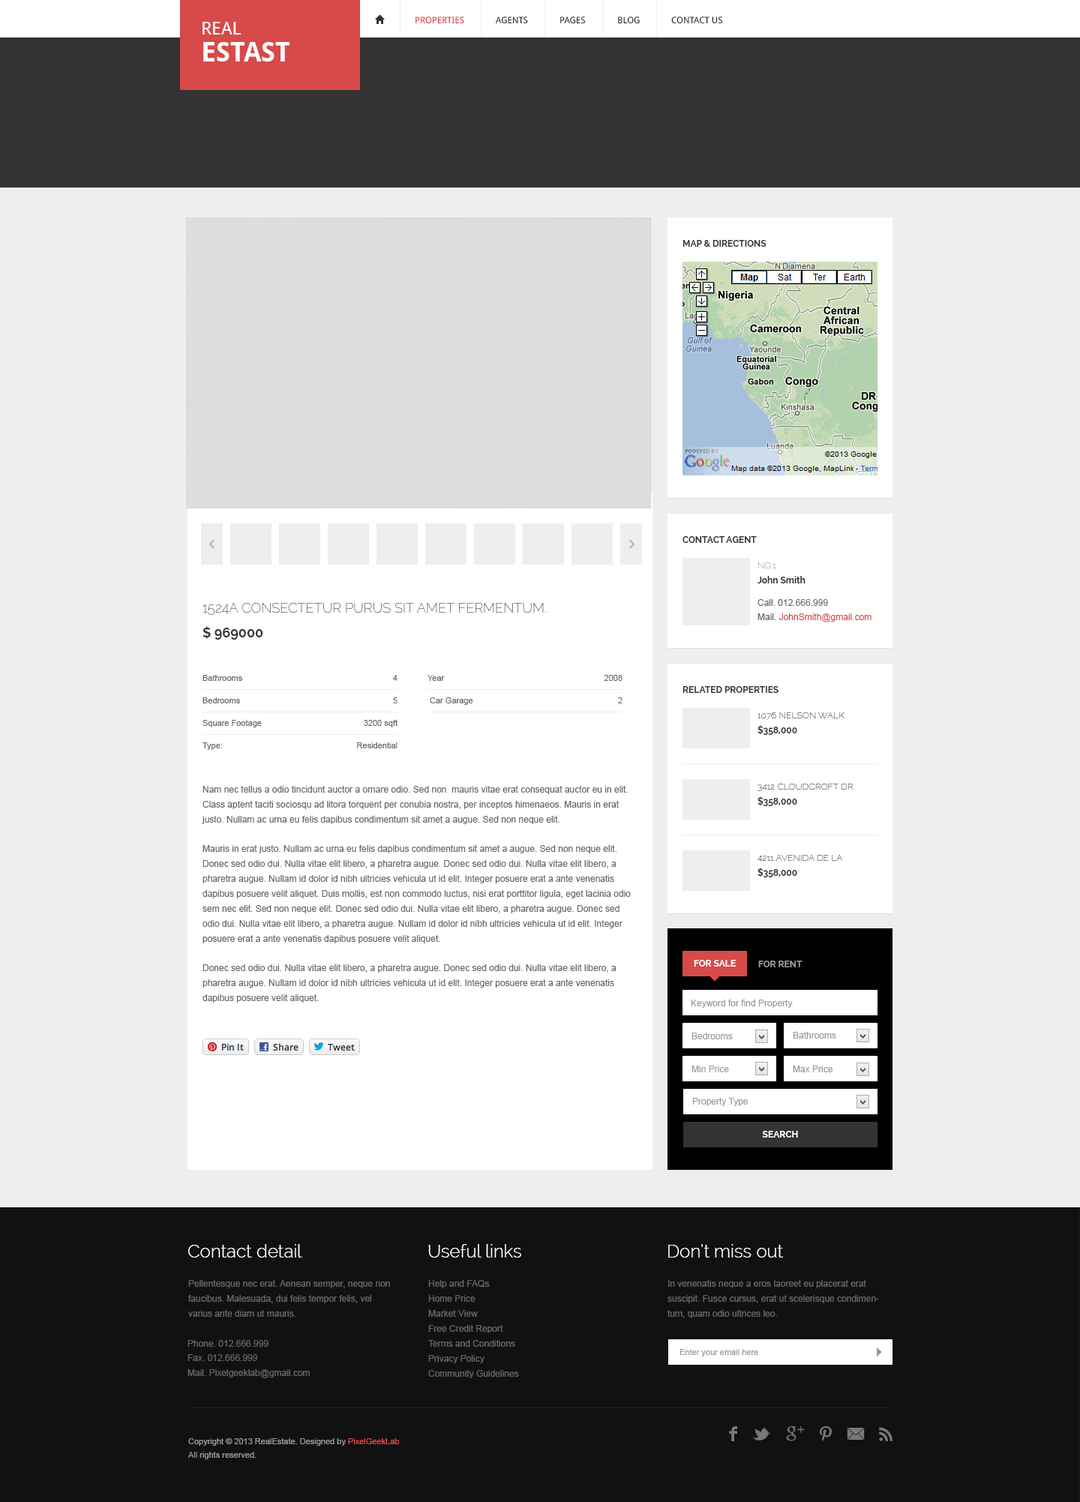
<style>
.page{position:relative;width:1080px;height:1502px;background:#eeeeee}
.page>*{position:absolute;margin:0}
.t1{font:9px "DroidSans";color:#d84949;text-transform:uppercase}
.t2{font:9px "DroidSans";color:#333333;text-transform:uppercase}
.t3{font:27px/27px "DroidSans-Bold";color:#ffffff;text-transform:uppercase}
.t4{font:18px/27px "DroidSans";color:#ffffff;text-transform:uppercase}
.t5{font:9px "Raleway-Bold";color:#333333;text-transform:uppercase}
.t6{font:9px "Raleway-Thin";text-transform:uppercase}
.t7{font:9px "Raleway-Bold";color:#333333}
.t8{font:13.5px "Raleway-Thin";color:#333333;text-transform:uppercase}
.t9{font:9px "ArialMT";color:#666666}
.t10{font:9px "ArialMT";color:#d84949}
.t11{font:13.5px "Raleway-Bold";color:#333333;text-transform:uppercase}
.t12{font:8.2px "ArialMT";color:#666666}
.t13{font:9px "Raleway-Thin";color:#333333;text-transform:uppercase}
.t14{font:9px/15px "ArialMT";color:#666666}
.t15{font:9px "Raleway-Bold";color:#ffffff;text-transform:uppercase}
.t16{font:9px "Raleway-Bold";color:#999999;text-transform:uppercase}
.t17{font:9px "ArialMT";color:#999999}
</style>
<div class="page">
<p class="t1" style="left:416px;top:16px;width:48px;height:8px">Properties</p>
<p class="t2" style="left:496px;top:16px;width:32px;height:8px">agents</p>
<p class="t2" style="left:560px;top:16px;width:26px;height:8px">pages</p>
<p class="t2" style="left:618px;top:16px;width:22px;height:8px">blog</p>
<p class="t2" style="left:671px;top:16px;width:52px;height:8px">contact us</p>
<p class="t3" style="left:202px;top:22px;width:88px;height:40px"><span class="t4">Real <br></span>Estast</p>
<p class="t5" style="left:682px;top:240px;width:84px;height:7px">Map &amp; Directions</p>
<p class="t5" style="left:682px;top:536px;width:75px;height:7px">contact agent</p>
<p class="t6" style="left:758px;top:562px;width:18px;height:6px">No.1</p>
<p class="t7" style="left:758px;top:576px;width:48px;height:8px">John Smith</p>
<p class="t8" style="left:202px;top:603px;width:344px;height:12px">1524A consectetur purus sit amet fermentum.</p>
<p class="t9" style="left:758px;top:599px;width:70px;height:7px">Call. 012.666.999</p>
<p class="t10" style="left:758px;top:614px;width:114px;height:8px"><span class="t9">Mail. </span>JohnSmith@gmail.com</p>
<p class="t11" style="left:202px;top:626px;width:61px;height:14px">$ 969000</p>
<p class="t12" style="left:202px;top:675px;width:40px;height:6px">Bathrooms</p>
<p class="t12" style="left:393px;top:675px;width:5px;height:6px">4</p>
<p class="t12" style="left:428px;top:675px;width:17px;height:6px">Year</p>
<p class="t12" style="left:604px;top:675px;width:18px;height:6px">2008</p>
<p class="t5" style="left:682px;top:686px;width:96px;height:7px">Related Properties</p>
<p class="t12" style="left:202px;top:698px;width:38px;height:6px">Bedrooms</p>
<p class="t12" style="left:393px;top:698px;width:5px;height:6px">5</p>
<p class="t12" style="left:430px;top:698px;width:43px;height:7px">Car Garage</p>
<p class="t12" style="left:618px;top:698px;width:4px;height:6px">2</p>
<p class="t13" style="left:758px;top:712px;width:86px;height:8px">1076 Nelson Walk</p>
<p class="t12" style="left:202px;top:720px;width:60px;height:8px">Square Footage</p>
<p class="t12" style="left:364px;top:720px;width:34px;height:8px">3200 sqft</p>
<p class="t5" style="left:758px;top:725px;width:39px;height:10px">$358,000</p>
<p class="t12" style="left:202px;top:742px;width:20px;height:8px">Type:</p>
<p class="t12" style="left:357px;top:742px;width:41px;height:6px">Residential</p>
<p class="t6" style="left:758px;top:784px;width:95px;height:7px">3412 Cloudcroft Dr</p>
<p class="t14" style="left:202px;top:786px;width:426px;height:38px">Nam nec tellus a odio tincidunt auctor a ornare odio. Sed non  mauris vitae erat consequat auctor eu in elit. Class aptent taciti sociosqu ad litora torquent per conubia nostra, per inceptos himenaeos. Mauris in erat justo. Nullam ac urna eu felis dapibus condimentum sit amet a augue. Sed non neque elit.</p>
<p class="t5" style="left:758px;top:796px;width:39px;height:10px">$358,000</p>
<p class="t14" style="left:202px;top:845px;width:429px;height:99px">Mauris in erat justo. Nullam ac urna eu felis dapibus condimentum sit amet a augue. Sed non neque elit. Donec sed odio dui. Nulla vitae elit libero, a pharetra augue. Donec sed odio dui. Nulla vitae elit libero, a pharetra augue. Nullam id dolor id nibh ultricies vehicula ut id elit. Integer posuere erat a ante venenatis dapibus posuere velit aliquet. Duis mollis, est non commodo luctus, nisi erat porttitor ligula, eget lacinia odio sem nec elit. Sed non neque elit. Donec sed odio dui. Nulla vitae elit libero, a pharetra augue. Donec sed odio dui. Nulla vitae elit libero, a pharetra augue. Nullam id dolor id nibh ultricies vehicula ut id elit. Integer posuere erat a ante venenatis dapibus posuere velit aliquet.</p>
<p class="t13" style="left:758px;top:855px;width:85px;height:7px">4211 Avenida De La</p>
<p class="t5" style="left:758px;top:868px;width:39px;height:10px">$358,000</p>
<p class="t14" style="left:202px;top:964px;width:414px;height:39px">Donec sed odio dui. Nulla vitae elit libero, a pharetra augue. Donec sed odio dui. Nulla vitae elit libero, a pharetra augue. Nullam id dolor id nibh ultricies vehicula ut id elit. Integer posuere erat a ante venenatis dapibus posuere velit aliquet.</p>
<p class="t15" style="left:694px;top:960px;width:42px;height:7px">for sale</p>
<p class="t16" style="left:758px;top:961px;width:44px;height:7px">for rent</p>
<p class="t17" style="left:691px;top:1000px;width:102px;height:8px">Keyword for find Property</p>
<p class="t17" style="left:692px;top:1033px;width:41px;height:7px">Bedrooms</p>
<p class="t17" style="left:793px;top:1032px;width:43px;height:7px">Bathrooms</p>
<p class="t17" style="left:692px;top:1066px;width:37px;height:6px">Min Price</p>
<p class="t17" style="left:793px;top:1066px;width:39px;height:6px">Max Price</p>
<p class="t17" style="left:692px;top:1098px;width:56px;height:8px">Property Type</p>
<p class="t15" style="left:762px;top:1131px;width:36px;height:7px">search</p>
</div>
